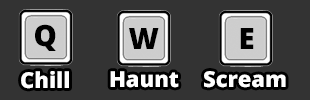
<style>
.page{position:relative;width:310px;height:100px;background:#333333}
.page>*{position:absolute;margin:0}
.t1{font:29.3px "OpenSans-Extrabold";color:#000000}
.t2{font:21.9px "OpenSans-Extrabold";color:#ffffff}
</style>
<div class="page">
<p class="t1" style="left:35px;top:24px;width:21px;height:27px">Q</p>
<p class="t1" style="left:129px;top:28px;width:30px;height:21px">W</p>
<p class="t1" style="left:240px;top:28px;width:14px;height:21px">E</p>
<p class="t2" style="left:21px;top:71px;width:48px;height:18px">Chill</p>
<p class="t2" style="left:110px;top:71px;width:69px;height:17px">Haunt</p>
<p class="t2" style="left:204px;top:71px;width:82px;height:17px">Scream</p>
</div>
